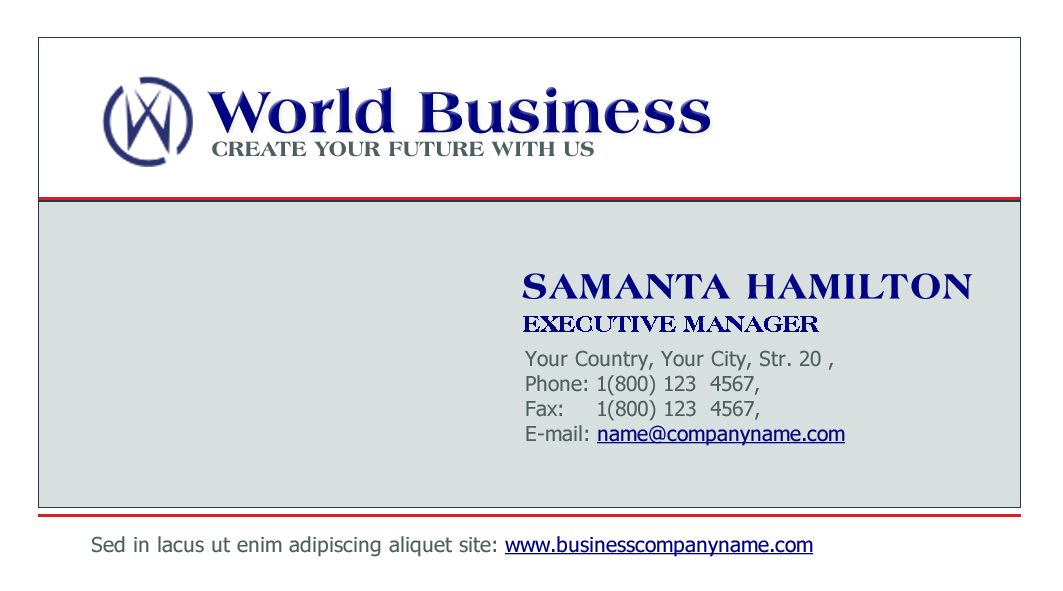
<style>
.page{position:relative;width:1063px;height:591px;background:#ffffff}
.page>*{position:absolute;margin:0}
.t1{font:62.1px "AmericanaBT-ExtraBold";letter-spacing:0.01em;color:#000382}
.t2{font:21.9px "AmericanaBT-ExtraBold";letter-spacing:0.01em;color:#4e5f60;text-transform:uppercase}
.t3{font:37.5px "AmericanaBT-ExtraBold";letter-spacing:0.05em;color:#000382;text-transform:uppercase}
.t4{font:25px "AmericanaBT-ExtraBold";color:#000382;text-transform:uppercase}
.t5{font:20.8px/25px "Tahoma";color:#4e5f60}
.t6{font:20.8px/25px "Tahoma";color:#000382;text-decoration:underline}
.t7{font:20.8px "Tahoma";color:#4e5f60}
.t8{font:20.8px "Tahoma";color:#000382;text-decoration:underline}
</style>
<div class="page">
<p class="t1" style="left:207px;top:87px;width:503px;height:47px">World Business</p>
<p class="t2" style="left:212px;top:141px;width:382px;height:16px">create your future with us</p>
<p class="t3" style="left:522px;top:273px;width:451px;height:26px">Samanta Hamilton</p>
<p class="t4" style="left:523px;top:316px;width:296px;height:16px">Executive Manager</p>
<p class="t5" style="left:525px;top:350px;width:320px;height:96px">Your Country, Your City, Str. 20 , <br>Phone: 1(800) 123  4567, <br>Fax:    1(800) 123  4567,<br>E-mail: <span class="t6">name@companyname.com</span></p>
<p class="t7" style="left:92px;top:536px;width:721px;height:21px">Sed in lacus ut enim adipiscing aliquet site: <span class="t8">www.businesscompanyname.com</span></p>
</div>
